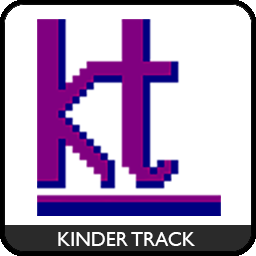
<style>
.page{position:relative;width:256px;height:256px;background:#ffffff}
.page>*{position:absolute;margin:0}
.t1{font:20px "GillSansMT";color:#ffffff}
</style>
<div class="page">
<p class="t1" style="left:58px;top:232px;width:137px;height:14px">KINDER TRACK</p>
</div>
